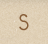
<style>
.page{position:relative;width:48px;height:44px}
.page>*{position:absolute;margin:0}
.t1{font:26px "Eurofurenceregular";color:#875f3a}
</style>
<div class="page">
<p class="t1" style="left:19px;top:14px;width:10px;height:17px">S</p>
</div>
